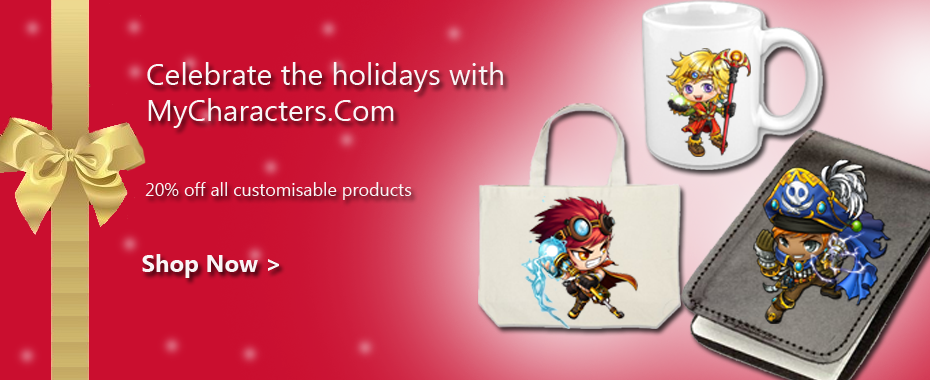
<style>
.page{position:relative;width:930px;height:380px}
.page>*{position:absolute;margin:0}
.t1{font:30px "KhmerUI";color:#f9f5f6}
.t2{font:18px "KhmerUI";color:#f9f5f6}
.t3{font:24px "KhmerUI-Bold";color:#f9f5f6}
</style>
<div class="page">
<p class="t1" style="left:147px;top:62px;width:356px;height:66px">Celebrate the holidays with <br>MyCharacters.Com</p>
<p class="t2" style="left:145px;top:182px;width:267px;height:18px">20% off all customisable products</p>
<p class="t3" style="left:142px;top:254px;width:137px;height:24px">Shop Now &gt;</p>
</div>
